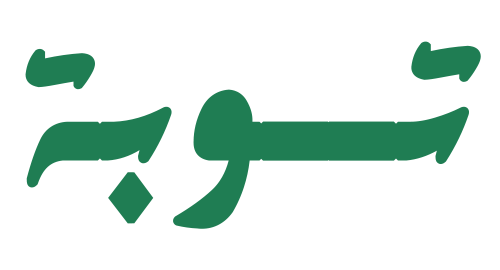
<style>
.page{position:relative;width:500px;height:270px;background:#ffffff}
.page>*{position:absolute;margin:0}
.t1{font:300px "UKIJRuqiTuz-Bold";color:#1f7d53;font-weight:bold}
</style>
<div class="page">
<p class="t1" style="left:25px;top:41px;width:456px;height:188px">تــوبة</p>
</div>
